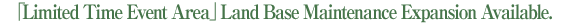
<style>
.page{position:relative;width:574px;height:24px;background:#ffffff}
.page>*{position:absolute;margin:0}
.t1{font:20px "RyuminPro-ExBold";letter-spacing:-0.08em;color:#46754a;scale:0.9 1}
</style>
<div class="page">
<p class="t1" style="left:18px;top:2px;width:534px;height:21px">「Limited Time Event Area」Land Base Maintenance Expansion Available.</p>
</div>
